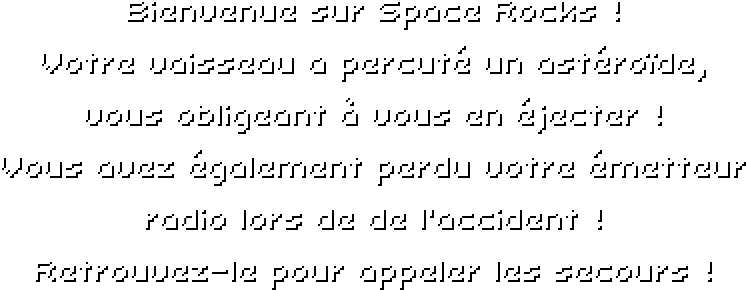
<style>
.page{position:relative;width:746px;height:290px;background:#ffffff}
.page>*{position:absolute;margin:0}
.t1{font:32px/52px "Uni0553"}
</style>
<div class="page">
<p class="t1" style="left:2px;top:2px;width:744px;height:288px;text-align:center">Bienvenue sur Space Rocks !<br>Votre vaisseau a percuté un astéroïde,<br>vous obligeant à vous en éjecter !<br>Vous avez également perdu votre émetteur<br>radio lors de de l’accident !<br>Retrouvez-le pour appeler les secours !</p>
</div>
